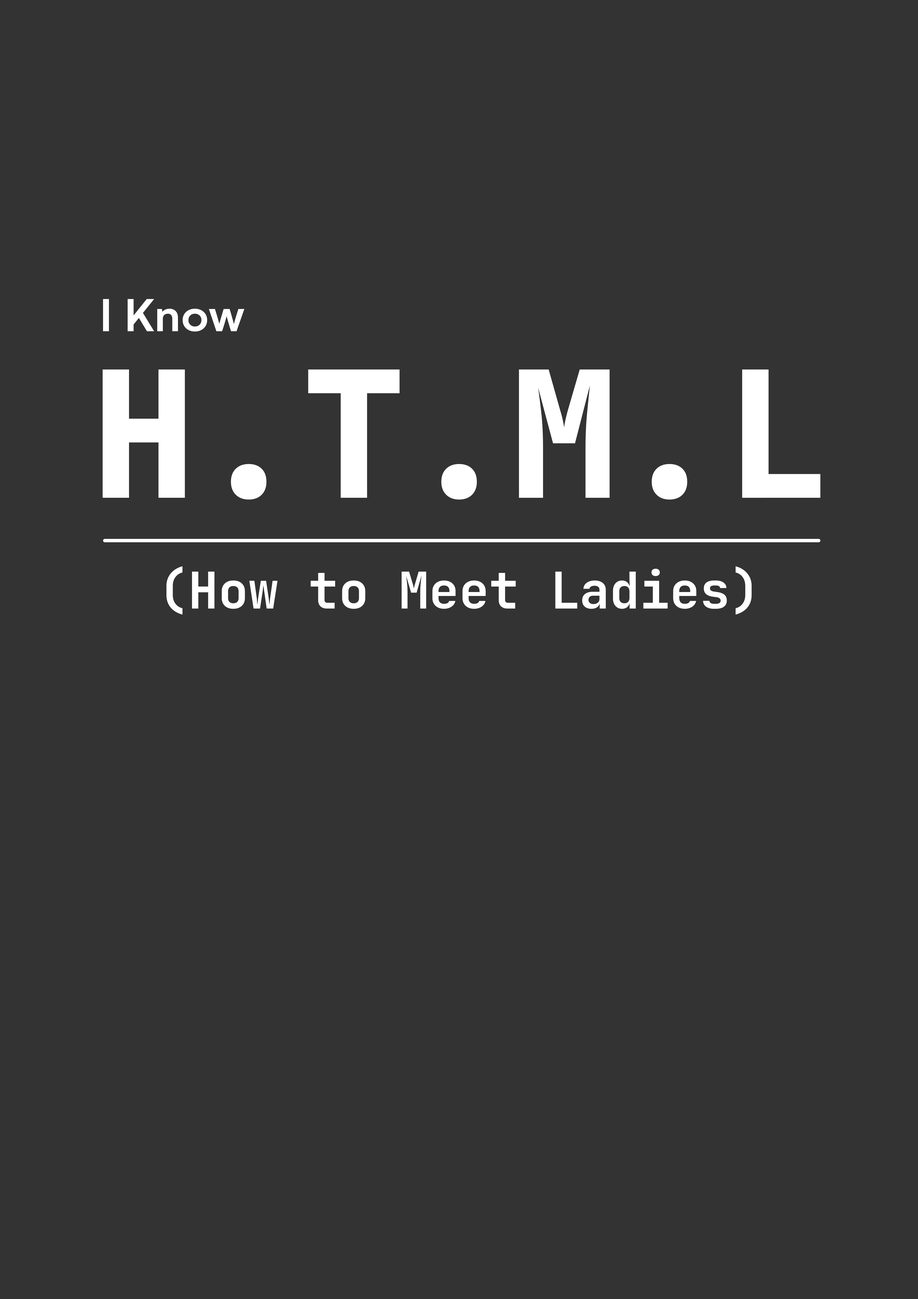
<style>
.page{position:relative;width:918px;height:1299px;background:#333333}
.page>*{position:absolute;margin:0}
.t1{font:50.3px "Gelion-Medium";color:#ffffff}
.t2{font:175.6px "JetBrainsMono-ExtraBold";color:#ffffff}
.t3{font:50.3px "JetBrainsMono-Bold";color:#ffffff}
</style>
<div class="page">
<p class="t1" style="left:103px;top:299px;width:141px;height:32px">I Know</p>
<p class="t2" style="left:103px;top:369px;width:718px;height:130px">H.T.M.L</p>
<p class="t3" style="left:166px;top:566px;width:586px;height:49px">)How to Meet Ladies(</p>
</div>
